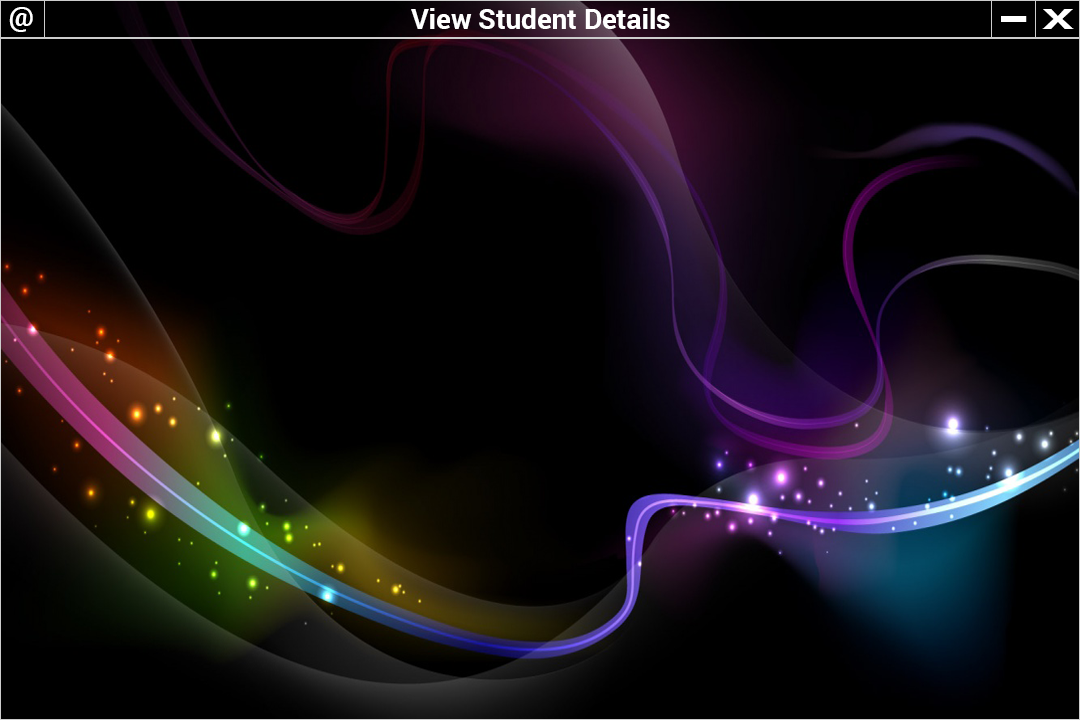
<style>
.page{position:relative;width:1080px;height:720px;background:#000000}
.page>*{position:absolute;margin:0}
.t1{font:27.8px "Roboto-Bold";color:#ffffff}
.t2{font:50px "Roboto-Bold";color:#ffffff;scale:1.81 1}
.t3{font:27.8px "Roboto-Bold";color:#ffffff;scale:1.81 1}
</style>
<div class="page">
<p class="t1" style="left:9px;top:7px;width:24px;height:25px">@</p>
<p class="t1" style="left:411px;top:8px;width:259px;height:21px">View Student Details</p>
<p class="t2" style="left:1001px;top:16px;width:26px;height:6px">-</p>
<p class="t3" style="left:1042px;top:9px;width:32px;height:20px">X</p>
</div>
